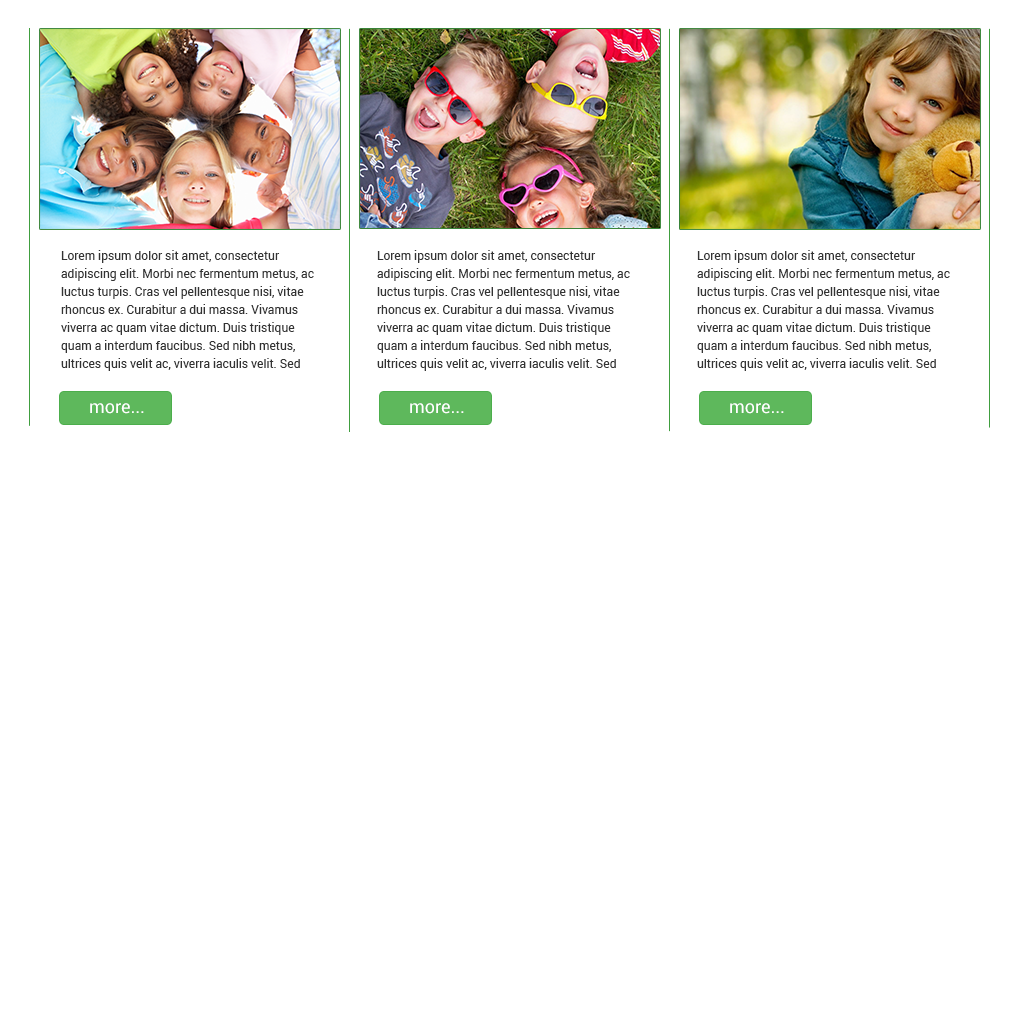
<style>
.page{position:relative;width:1020px;height:1020px;background:#ffffff}
.page>*{position:absolute;margin:0}
.t1{font:12px/18px "Roboto-Regular";color:#333333}
.t2{font:18px "Roboto-Regular";color:#ffffff}
</style>
<div class="page">
<p class="t1" style="left:61px;top:250px;width:253px;height:121px">Lorem ipsum dolor sit amet, consectetur adipiscing elit. Morbi nec fermentum metus, ac luctus turpis. Cras vel pellentesque nisi, vitae rhoncus ex. Curabitur a dui massa. Vivamus viverra ac quam vitae dictum. Duis tristique quam a interdum faucibus. Sed nibh metus, ultrices quis velit ac, viverra iaculis velit. Sed mattis eros non felis ullamcorper, id porta massa imperdiet.</p>
<p class="t1" style="left:377px;top:250px;width:253px;height:121px">Lorem ipsum dolor sit amet, consectetur adipiscing elit. Morbi nec fermentum metus, ac luctus turpis. Cras vel pellentesque nisi, vitae rhoncus ex. Curabitur a dui massa. Vivamus viverra ac quam vitae dictum. Duis tristique quam a interdum faucibus. Sed nibh metus, ultrices quis velit ac, viverra iaculis velit. Sed mattis eros non felis ullamcorper, id porta massa imperdiet.</p>
<p class="t1" style="left:697px;top:250px;width:253px;height:121px">Lorem ipsum dolor sit amet, consectetur adipiscing elit. Morbi nec fermentum metus, ac luctus turpis. Cras vel pellentesque nisi, vitae rhoncus ex. Curabitur a dui massa. Vivamus viverra ac quam vitae dictum. Duis tristique quam a interdum faucibus. Sed nibh metus, ultrices quis velit ac, viverra iaculis velit. Sed mattis eros non felis ullamcorper, id porta massa imperdiet.</p>
<p class="t2" style="left:90px;top:403px;width:54px;height:11px">more...</p>
<p class="t2" style="left:410px;top:403px;width:54px;height:11px">more...</p>
<p class="t2" style="left:730px;top:403px;width:54px;height:11px">more...</p>
</div>
